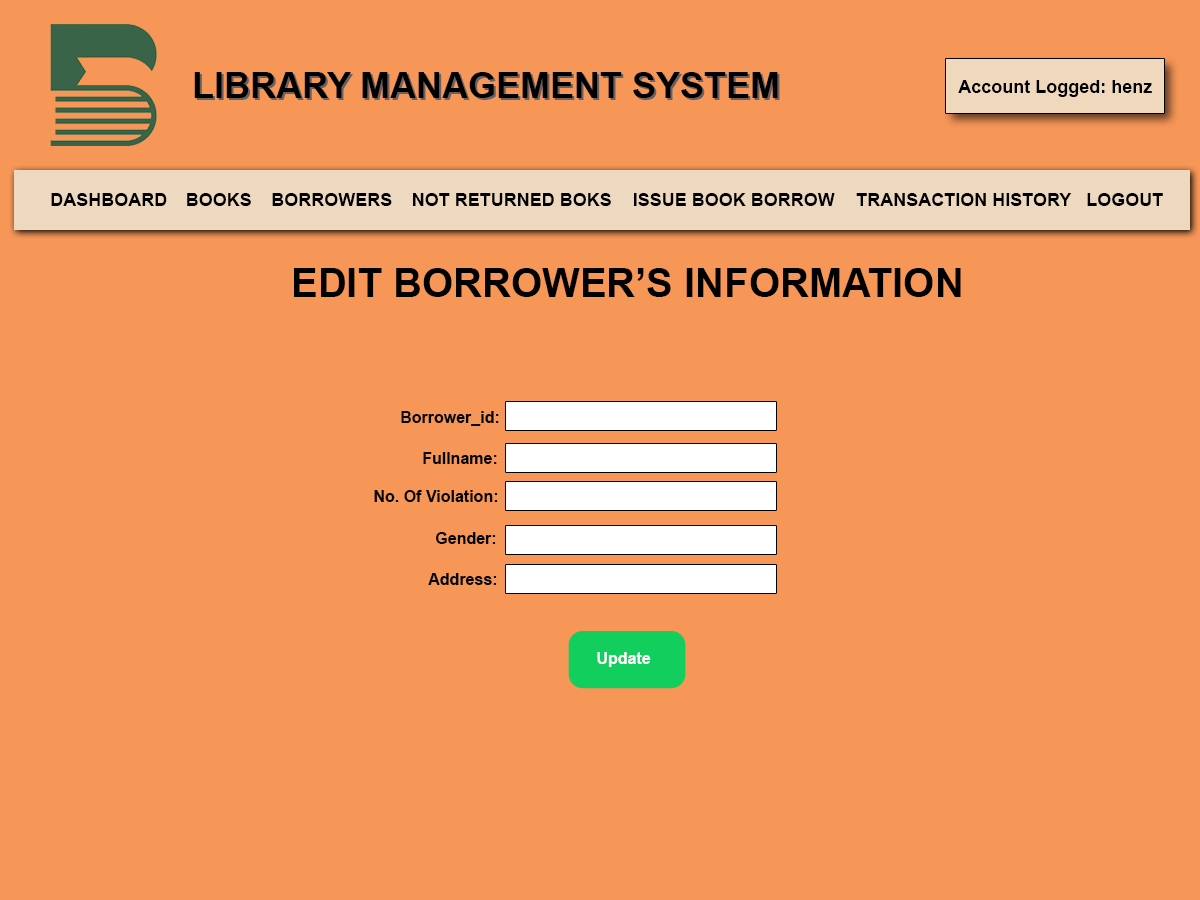
<style>
.page{position:relative;width:1200px;height:900px;background:#f69657}
.page>*{position:absolute;margin:0}
.t1{font:36px "Arial-BoldMT";color:#000000}
.t2{font:18px "Arial-BoldMT";color:#000000}
.t3{font:40px "Arial-BoldMT";color:#000000}
.t4{font:16px "Arial-BoldMT";color:#000000}
.t5{font:16px "Arial-BoldMT";color:#ffffff}
</style>
<div class="page">
<p class="t1" style="left:194px;top:72px;width:584px;height:26px">LIBRARY MANAGEMENT SYSTEM</p>
<p class="t2" style="left:958px;top:80px;width:194px;height:17px">Account Logged: henz</p>
<p class="t2" style="left:51px;top:193px;width:116px;height:13px">DASHBOARD</p>
<p class="t2" style="left:187px;top:193px;width:64px;height:13px">BOOKS</p>
<p class="t2" style="left:272px;top:193px;width:120px;height:13px">BORROWERS</p>
<p class="t2" style="left:413px;top:193px;width:198px;height:13px">NOT RETURNED BOKS</p>
<p class="t2" style="left:634px;top:193px;width:201px;height:13px">ISSUE BOOK BORROW</p>
<p class="t2" style="left:856px;top:193px;width:216px;height:13px">TRANSACTION HISTORY</p>
<p class="t2" style="left:1087px;top:193px;width:76px;height:13px">LOGOUT</p>
<p class="t3" style="left:294px;top:268px;width:667px;height:29px">EDIT BORROWER’S INFORMATION</p>
<p class="t4" style="left:401px;top:411px;width:98px;height:15px">Borrower_id:</p>
<p class="t4" style="left:423px;top:452px;width:74px;height:12px">Fullname:</p>
<p class="t4" style="left:374px;top:490px;width:124px;height:12px">No. Of Violation:</p>
<p class="t4" style="left:436px;top:532px;width:60px;height:12px">Gender:</p>
<p class="t4" style="left:428px;top:573px;width:69px;height:12px">Address:</p>
<p class="t5" style="left:597px;top:652px;width:54px;height:15px">Update</p>
</div>
